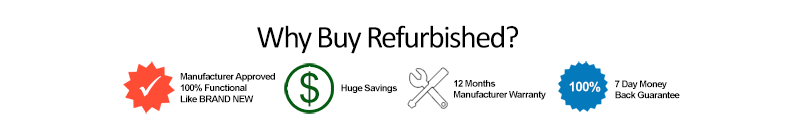
<style>
.page{position:relative;width:800px;height:125px;background:#ffffff}
.page>*{position:absolute;margin:0}
.t1{font:31.9px "Calibri";letter-spacing:-0.05em;color:#000000}
.t2{font:9.3px "Arial-BoldMT";letter-spacing:-0.05em;color:#000000}
.t3{font:40.3px "ArialMT";letter-spacing:-0.05em;color:#045c13}
.t4{font:9.3px "Arial-BoldMT";letter-spacing:-0.05em;color:#010101}
.t5{font:13.3px "Arial-BoldMT";letter-spacing:-0.05em;color:#ffffff}
</style>
<div class="page">
<p class="t1" style="left:257px;top:25px;width:261px;height:29px">Why Buy Refurbished?</p>
<p class="t2" style="left:180px;top:73px;width:95px;height:30px">Manufacturer Approved<br>100% Functional<br>Like BRAND NEW</p>
<p class="t3" style="left:300px;top:71px;width:19px;height:36px">$</p>
<p class="t4" style="left:341px;top:84px;width:56px;height:9px">Huge Savings</p>
<p class="t4" style="left:454px;top:80px;width:92px;height:20px">12 Months <br>Manufacturer Warranty</p>
<p class="t5" style="left:569px;top:81px;width:32px;height:11px">100%</p>
<p class="t2" style="left:615px;top:80px;width:65px;height:19px">7 Day Money<br>Back Guarantee</p>
</div>
